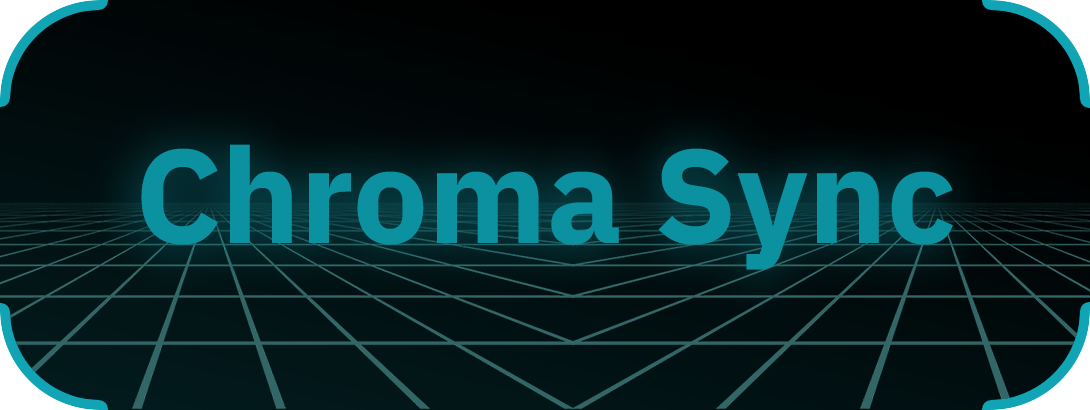
<style>
.page{position:relative;width:1090px;height:410px}
.page>*{position:absolute;margin:0}
.t1{font:132.8px "IBMPlexSans-Bold";color:#0b91a0}
</style>
<div class="page">
<p class="t1" style="left:141px;top:144px;width:812px;height:126px">Chroma Sync</p>
</div>
